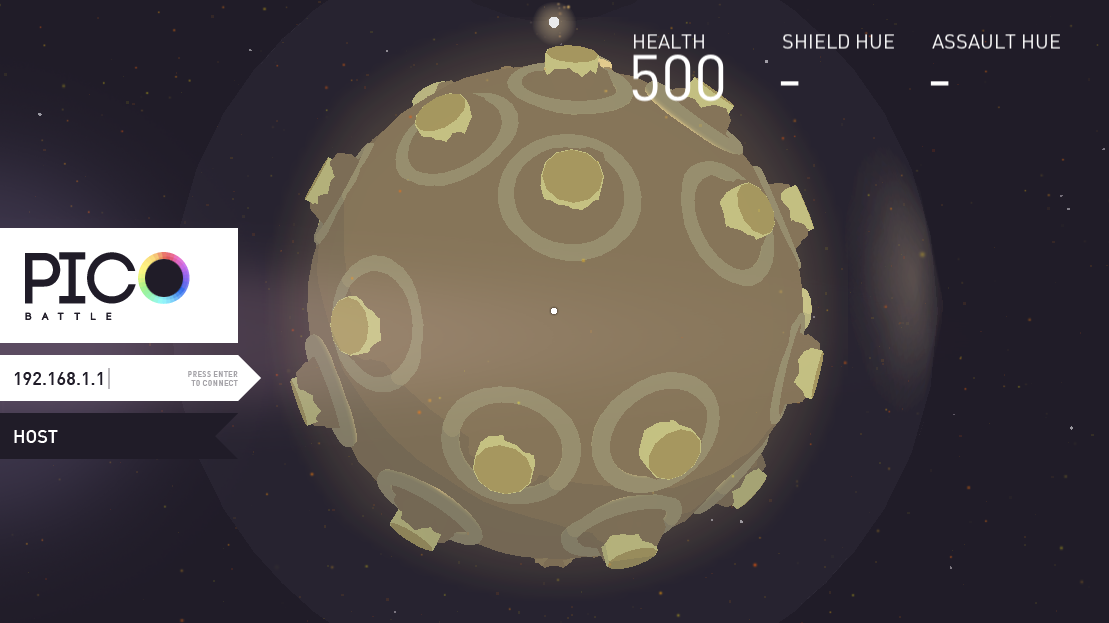
<style>
.page{position:relative;width:1109px;height:623px;background:#201c28}
.page>*{position:absolute;margin:0}
.t1{font:72.2px "Code-Bold";color:#201c28}
.t2{font:10.6px "Code-Bold";letter-spacing:1em;color:#201c28}
.t3{font:18.1px "DIN-Medium";color:#201c28}
.t4{font:7.9px "DIN-Medium";color:#a6a4a9}
.t5{font:18.1px "DIN-Medium";color:#ffffff}
</style>
<div class="page">
<p class="t1" style="left:25px;top:252px;width:165px;height:52px">PICO</p>
<p class="t2" style="left:25px;top:312px;width:87px;height:8px">BATTLE</p>
<p class="t3" style="left:14px;top:372px;width:89px;height:13px">192.168.1.1</p>
<p class="t4" style="left:188px;top:371px;width:50px;height:15px;text-align:right">PRESS ENTER<br>TO CONNECT</p>
<p class="t5" style="left:14px;top:430px;width:44px;height:13px">HOST</p>
</div>
